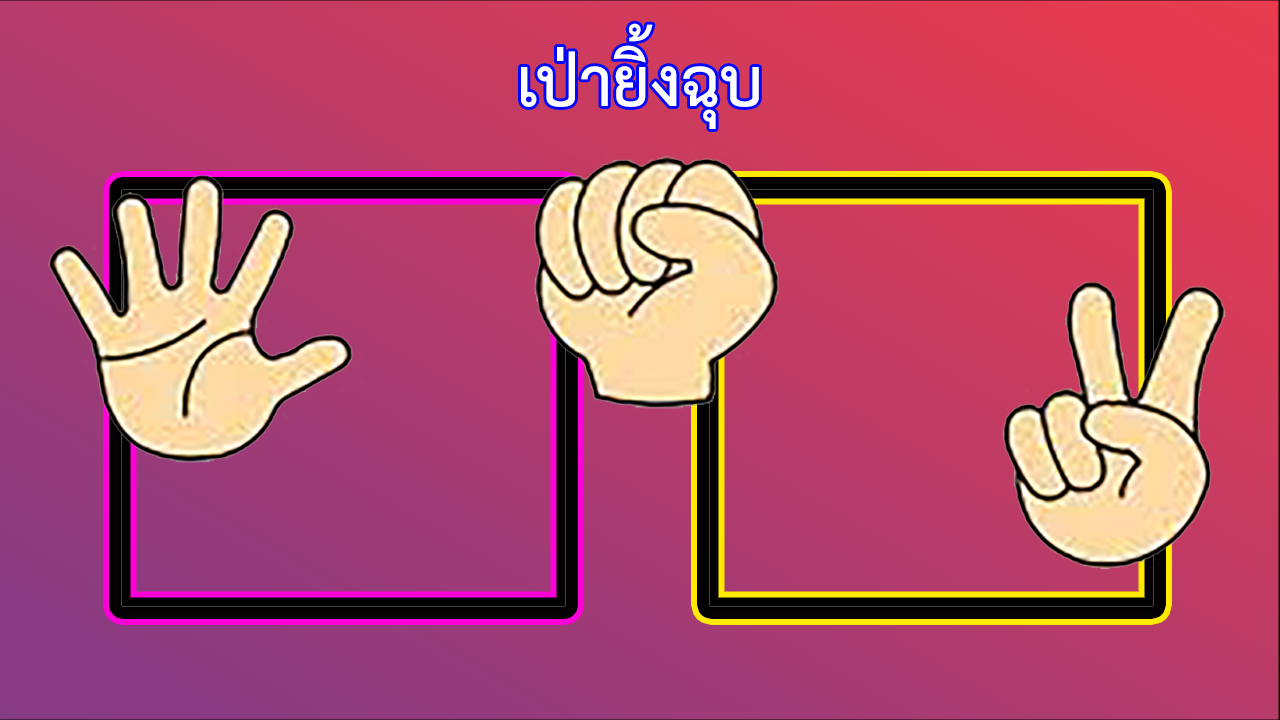
<style>
.page{position:relative;width:1280px;height:720px}
.page>*{position:absolute;margin:0}
.t1{font:97.2px "THSarabunPSK-Bold";color:#ffffff}
</style>
<div class="page">
<p class="t1" style="left:521px;top:23px;width:238px;height:106px">เป่ายิ้งฉุบ</p>
</div>
